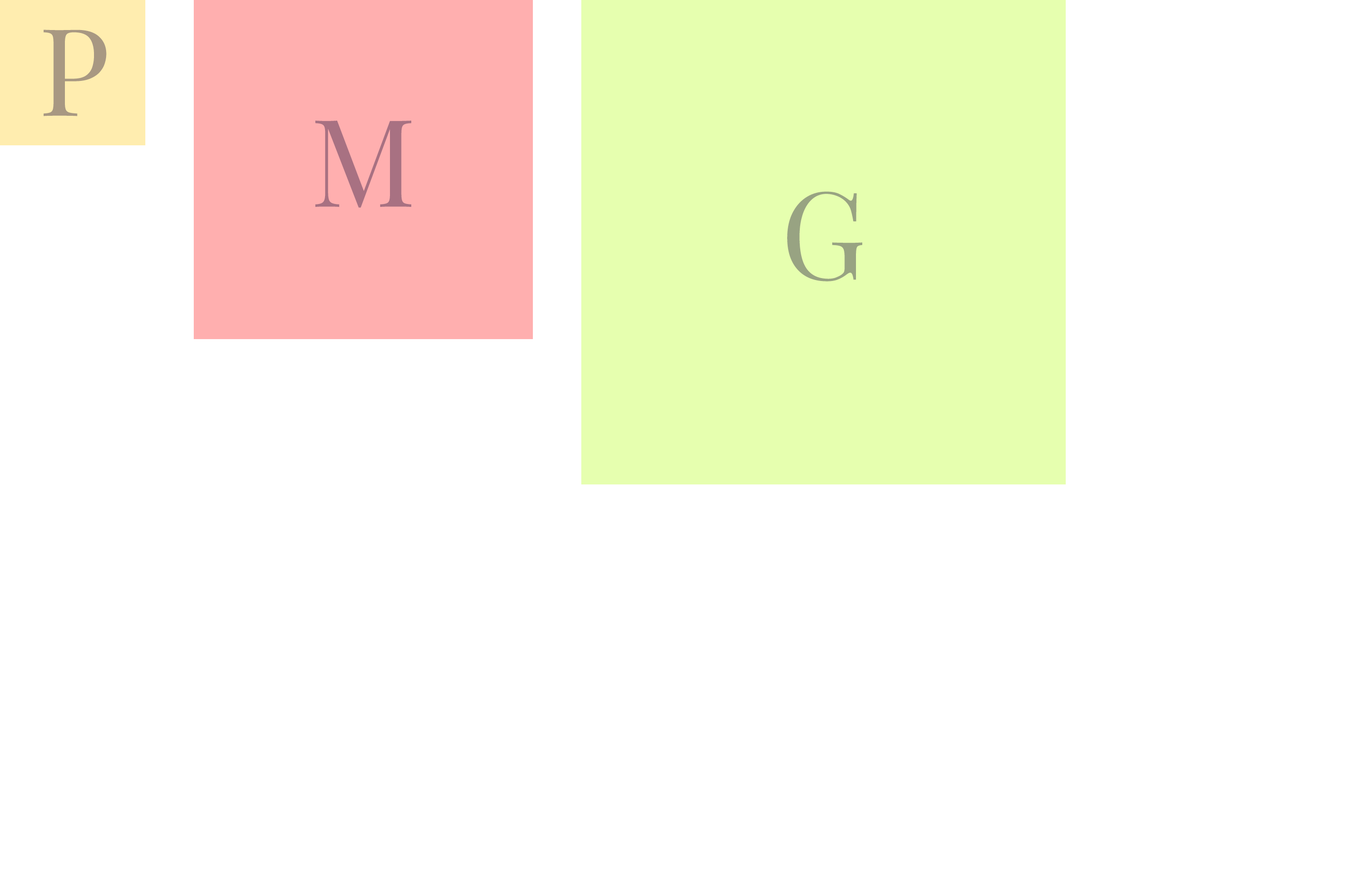
<style>
.page{position:relative;width:1368px;height:872px;background:#ffffff}
.page>*{position:absolute;margin:0}
.t1{font:121.7px "PlayfairDisplay-Regular";color:#a89882;text-transform:uppercase}
.t2{font:121.7px "PlayfairDisplay-Regular";color:#a87182;text-transform:uppercase}
.t3{font:121.7px "PlayfairDisplay-Regular";color:#98a382;text-transform:uppercase}
</style>
<div class="page">
<p class="t1" style="left:44px;top:30px;width:63px;height:86px">p</p>
<p class="t2" style="left:315px;top:121px;width:96px;height:87px">M</p>
<p class="t3" style="left:787px;top:191px;width:75px;height:90px">g</p>
</div>
